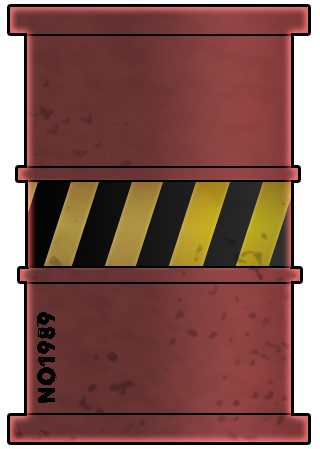
<style>
.page{position:relative;width:320px;height:449px}
.page>*{position:absolute;margin:0}
.t1{font:25.3px "Amateur-Dirty";color:#000000}
</style>
<div class="page">
<p class="t1" style="left:37px;top:312px;width:20px;height:91px;rotate:-90deg">NO1989</p>
</div>
